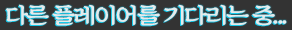
<style>
.page{position:relative;width:292px;height:30px;background:#333333}
.page>*{position:absolute;margin:0}
.t1{font:23.3px "SDKukdetopokki-aLt";letter-spacing:-0.08em;color:#faffff;scale:1.08 1}
.t2{font:23.3px "SDKukdetopokki-aLt";letter-spacing:-0.02em;color:#faffff;scale:1.08 1}
</style>
<div class="page">
<p class="t1" style="left:6px;top:4px;width:281px;height:22px;opacity:0.9">다른 플레이어를 기다리는 중<span class="t2">...</span></p>
</div>
